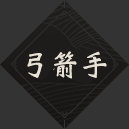
<style>
.page{position:relative;width:129px;height:129px;background:#333333}
.page>*{position:absolute;margin:0}
.t1{font:30px "WeibeiTC-Bold";color:#e8e3d6}
</style>
<div class="page">
<p class="t1" style="left:27px;top:51px;width:80px;height:28px">弓箭手</p>
</div>
